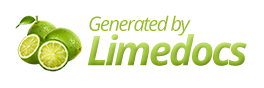
<style>
.page{position:relative;width:264px;height:88px;background:#ffffff}
.page>*{position:absolute;margin:0}
.t1{font:19.8px "OpenSans-Italic";letter-spacing:-0.07em;color:#97bb2b}
.t2{font:41.1px "OpenSans-BoldItalic";letter-spacing:-0.07em}
</style>
<div class="page">
<p class="t1" style="left:89px;top:15px;width:102px;height:21px">Generated by</p>
<p class="t2" style="left:87px;top:34px;width:160px;height:32px">Limedocs</p>
</div>
